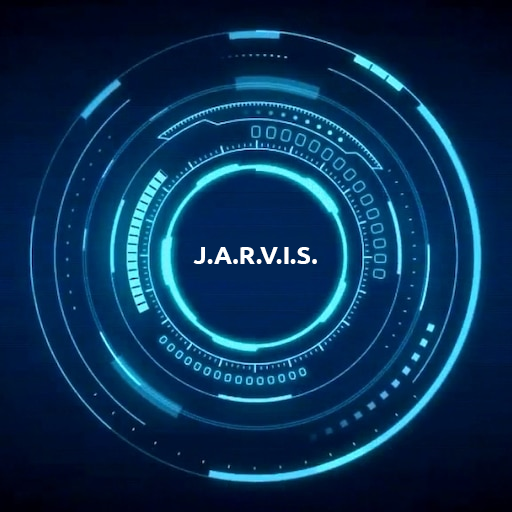
<style>
.page{position:relative;width:512px;height:512px}
.page>*{position:absolute;margin:0}
.t1{font:25px "Ubuntu-Bold";color:#ffffff}
</style>
<div class="page">
<p class="t1" style="left:193px;top:247px;width:124px;height:17px">J.A.R.V.I.S.</p>
</div>
